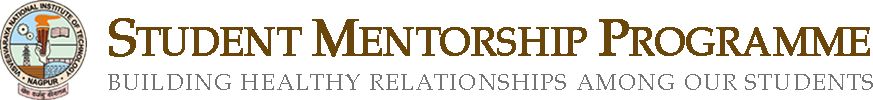
<style>
.page{position:relative;width:873px;height:100px;background:#ffffff}
.page>*{position:absolute;margin:0}
.t1{font:40.2px "BookAntiqua";letter-spacing:-0.025em;color:#6b460b;font-weight:bold}
.t2{font:51.9px "BookAntiqua";letter-spacing:-0.025em;color:#6b460b;font-weight:bold}
.t3{font:23px "BookAntiqua";letter-spacing:0.05em;color:#767575}
</style>
<div class="page">
<p class="t1" style="left:109px;top:18px;width:761px;height:39px"><span class="t2">S</span>TUDENT <span class="t2">M</span>ENTORSHIP <span class="t2">P</span>ROGRAMME</p>
<p class="t3" style="left:108px;top:74px;width:765px;height:16px">BUILDING HEALTHY RELATIONSHIPS AMONG OUR STUDENTS</p>
</div>
